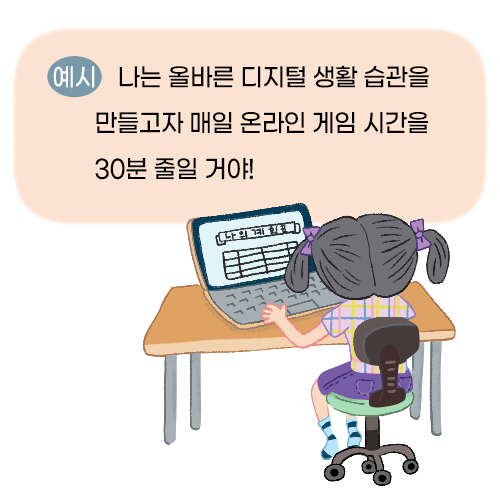
<style>
.page{position:relative;width:500px;height:500px;background:#ffffff}
.page>*{position:absolute;margin:0}
.t1{font:25px/45.8px "GmarketSansTTFMedium";letter-spacing:-0.02em;color:#000000;scale:0.94 1}
.t2{font:25px "GmarketSansTTFMedium";letter-spacing:-0.02em;color:#fffefe;scale:0.94 1}
</style>
<div class="page">
<p class="t1" style="left:95px;top:65px;width:334px;height:115px">나는 올바른 디지털 생활 습관을<br>만들고자 매일 온라인 게임 시간을<br>30분 줄일 거야!</p>
<p class="t2" style="left:53px;top:66px;width:42px;height:22px">예시</p>
</div>
